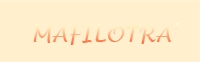
<style>
.page{position:relative;width:200px;height:62px;background:#ffefcd}
.page>*{position:absolute;margin:0}
.t1{font:22.1px "LucidaHandwriting-Italic";scale:0.97 1}
</style>
<div class="page">
<p class="t1" style="left:33px;top:23px;width:146px;height:22px">MAFILOTRA’</p>
</div>
